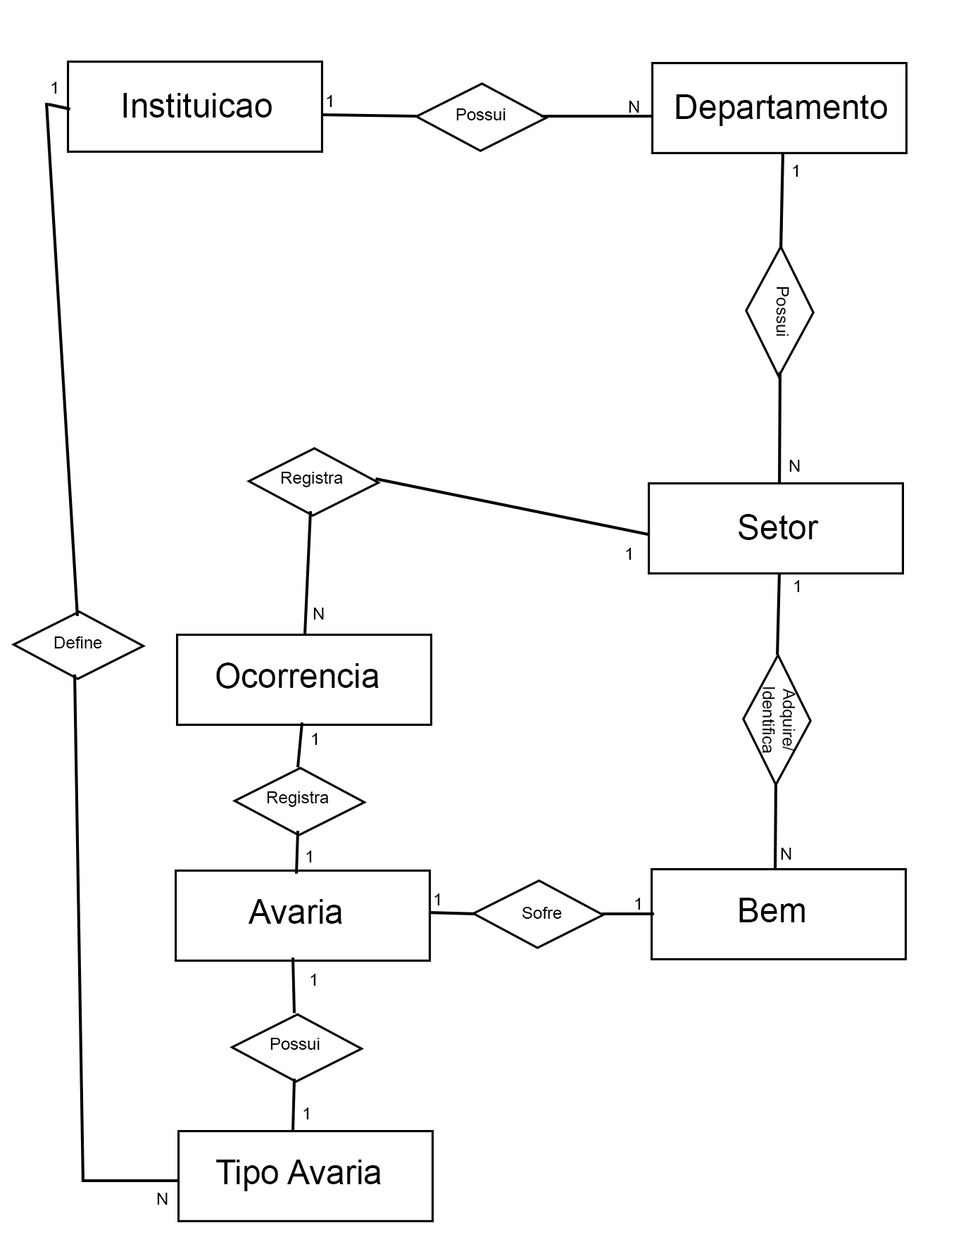
<style>
.page{position:relative;width:954px;height:1249px;background:#ffffff}
.page>*{position:absolute;margin:0}
.t1{font:16.9px "ArialMT";color:#000000}
.t2{font:33.8px "ArialMT";color:#000000}
</style>
<div class="page">
<p class="t1" style="left:51px;top:82px;width:6px;height:12px">1</p>
<p class="t2" style="left:123px;top:93px;width:149px;height:25px">Instituicao</p>
<p class="t1" style="left:327px;top:95px;width:5px;height:12px">1</p>
<p class="t1" style="left:629px;top:101px;width:11px;height:12px">N</p>
<p class="t2" style="left:676px;top:94px;width:211px;height:32px">Departamento</p>
<p class="t1" style="left:456px;top:108px;width:50px;height:12px">Possui</p>
<p class="t1" style="left:793px;top:165px;width:6px;height:12px">1</p>
<p class="t1" style="left:776px;top:287px;width:14px;height:49px;rotate:90deg">Possui</p>
<p class="t1" style="left:790px;top:460px;width:10px;height:12px">N</p>
<p class="t1" style="left:281px;top:471px;width:62px;height:16px">Registra</p>
<p class="t2" style="left:739px;top:514px;width:80px;height:26px">Setor</p>
<p class="t1" style="left:626px;top:548px;width:6px;height:12px">1</p>
<p class="t1" style="left:794px;top:580px;width:6px;height:12px">1</p>
<p class="t1" style="left:313px;top:608px;width:11px;height:12px">N</p>
<p class="t1" style="left:54px;top:637px;width:48px;height:12px">Define</p>
<p class="t2" style="left:216px;top:663px;width:163px;height:26px">Ocorrencia</p>
<p class="t1" style="left:762px;top:687px;width:34px;height:67px;text-align:center;rotate:90deg">Adquire/<br>Identifica</p>
<p class="t1" style="left:312px;top:733px;width:6px;height:12px">1</p>
<p class="t1" style="left:267px;top:791px;width:62px;height:16px">Registra</p>
<p class="t1" style="left:306px;top:851px;width:6px;height:12px">1</p>
<p class="t1" style="left:781px;top:848px;width:11px;height:12px">N</p>
<p class="t1" style="left:435px;top:894px;width:5px;height:12px">1</p>
<p class="t2" style="left:248px;top:899px;width:94px;height:25px">Avaria</p>
<p class="t1" style="left:635px;top:898px;width:6px;height:12px">1</p>
<p class="t2" style="left:740px;top:898px;width:65px;height:25px">Bem</p>
<p class="t1" style="left:523px;top:907px;width:39px;height:12px">Sofre</p>
<p class="t1" style="left:311px;top:974px;width:5px;height:12px">1</p>
<p class="t1" style="left:270px;top:1038px;width:50px;height:12px">Possui</p>
<p class="t1" style="left:304px;top:1108px;width:5px;height:12px">1</p>
<p class="t2" style="left:216px;top:1160px;width:165px;height:32px">Tipo Avaria</p>
<p class="t1" style="left:157px;top:1193px;width:11px;height:12px">N</p>
</div>
